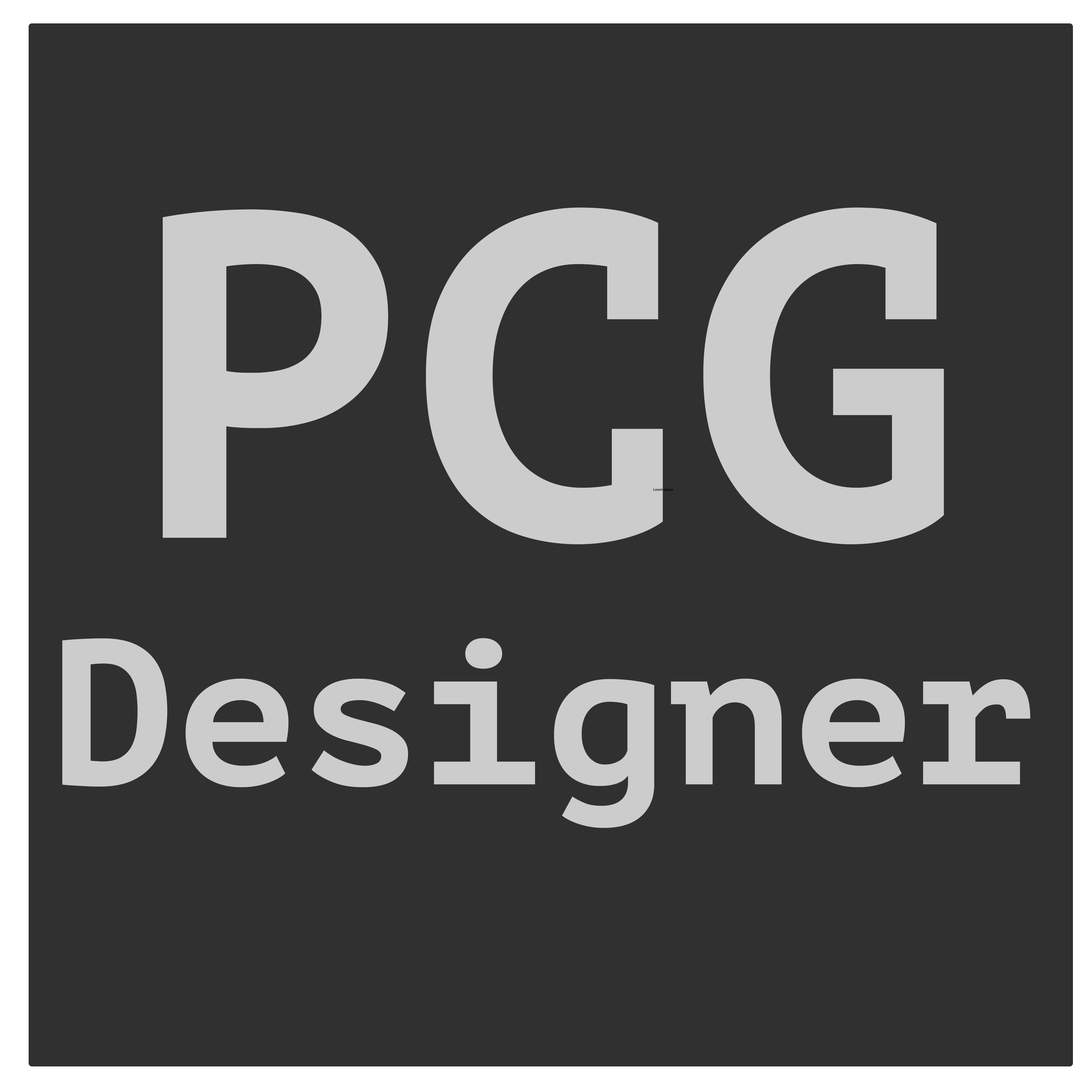
<style>
.page{position:relative;width:1092px;height:1092px;background:#303030}
.page>*{position:absolute;margin:0}
.t1{font:205.5px "PTMono-Bold";color:#cccccc}
.t2{font:462.3px "PTMono-Bold";color:#cccccc}
.t3{font:3.7px "MyriadPro-Regular";color:#000000}
</style>
<div class="page">
<p class="t1" style="left:62px;top:207px;width:968px;height:621px;text-align:center"><span class="t2">PCG<br></span>Designer</p>
<p class="t3" style="left:653px;top:488px;width:20px;height:4px">Lorem Ipsum</p>
</div>
